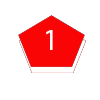
<style>
.page{position:relative;width:100px;height:100px;background:#ffffff}
.page>*{position:absolute;margin:0}
.t1{font:30px "MyriadPro-Regular";color:#fdfbfb}
</style>
<div class="page">
<p class="t1" style="left:46px;top:30px;width:7px;height:20px">1</p>
</div>
